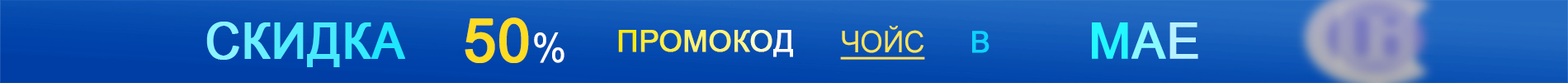
<style>
.page{position:relative;width:1568px;height:83px}
.page>*{position:absolute;margin:0}
.t1{font:59.4px "ArialNarrow";color:#fedc22;text-transform:uppercase;font-weight:bold;scale:1.19 1}
.t2{font:39.6px "ArialNarrow";color:#ffffff;scale:1.19 1}
.t3{font:49.5px "ArialNarrow";color:#89f3ff;font-weight:bold;scale:1.19 1}
.t4{font:49.5px "ArialNarrow";color:#69efff;font-weight:bold;scale:1.19 1}
.t5{font:49.5px "ArialNarrow";color:#53ecfe;font-weight:bold;scale:1.19 1}
.t6{font:49.5px "ArialNarrow";color:#48eafd;font-weight:bold;scale:1.19 1}
.t7{font:49.5px "ArialNarrow";color:#35eaff;font-weight:bold;scale:1.19 1}
.t8{font:49.5px "ArialNarrow";color:#1de6fe;font-weight:bold;scale:1.19 1}
.t9{font:29.7px "ArialMT";color:#ffeb09;text-transform:uppercase;font-weight:bold}
.t10{font:29.7px "ArialMT";color:#fceb37;text-transform:uppercase;font-weight:bold}
.t11{font:29.7px "ArialMT";color:#feef43;text-transform:uppercase;font-weight:bold}
.t12{font:29.7px "ArialMT";color:#fef26b;text-transform:uppercase;font-weight:bold}
.t13{font:29.7px "ArialMT";color:#fff377;text-transform:uppercase;font-weight:bold}
.t14{font:29.7px "ArialMT";color:#fff58a;text-transform:uppercase;font-weight:bold}
.t15{font:29.7px "ArialMT";color:#fefec5;text-transform:uppercase;font-weight:bold}
.t16{font:29.7px "ArialMT";color:#fefefd;text-transform:uppercase;font-weight:bold}
.t17{font:29.7px "ArialNarrow";color:#ffe554;text-transform:uppercase;text-decoration:underline;scale:1.19 1}
.t18{font:49.5px "ArialMT";color:#23f7ff;font-weight:bold}
.t19{font:49.5px "ArialMT";color:#88fafe;font-weight:bold}
.t20{font:49.5px "ArialMT";color:#b8f1ff;font-weight:bold}
.t21{font:29.7px "ArialMT";color:#0dd3fd;text-transform:uppercase;font-weight:bold}
</style>
<div class="page">
<p class="t1" style="left:465px;top:17px;width:99px;height:46px">50<span class="t2">%</span></p>
<p class="t3" style="left:206px;top:21px;width:199px;height:46px">С<span class="t4">К</span><span class="t5">И</span><span class="t6">Д</span><span class="t7">К</span><span class="t8">А</span></p>
<p class="t9" style="left:618px;top:30px;width:175px;height:27px">п<span class="t10">р</span><span class="t11">о</span><span class="t12">м</span><span class="t13">о</span><span class="t14">к</span><span class="t15">о</span><span class="t16">д</span></p>
<p class="t17" style="left:840px;top:26px;width:85px;height:33px">чойс</p>
<p class="t18" style="left:1092px;top:22px;width:106px;height:37px">М<span class="t19">А</span><span class="t20">Е</span></p>
<p class="t21" style="left:972px;top:31px;width:17px;height:22px">В</p>
</div>
